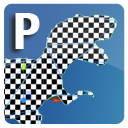
<style>
.page{position:relative;width:128px;height:128px}
.page>*{position:absolute;margin:0}
.t1{font:48px "CharcoalCY";color:#ffffff}
</style>
<div class="page">
<p class="t1" style="left:15px;top:13px;width:25px;height:36px">P</p>
</div>
